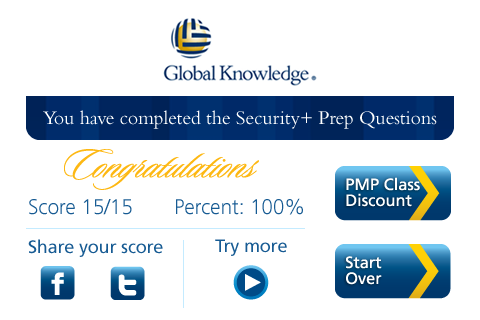
<style>
.page{position:relative;width:480px;height:320px;background:#ffffff}
.page>*{position:absolute;margin:0}
.t1{font:20px "Bembo";letter-spacing:-0.01em;color:#ffffff}
.t2{font:21px "Frutiger-Light";letter-spacing:-0.01em;color:#175b93}
.t3{font:18px "Frutiger-Roman";letter-spacing:-0.01em;color:#175b93}
</style>
<div class="page">
<p class="t1" style="left:43px;top:110px;width:394px;height:19px">You have completed the Security+ Prep Questions</p>
<p class="t2" style="left:176px;top:198px;width:127px;height:17px">Percent: 100%</p>
<p class="t2" style="left:29px;top:199px;width:103px;height:16px">Score 15/15</p>
<p class="t3" style="left:28px;top:239px;width:135px;height:18px">Share your score</p>
<p class="t3" style="left:215px;top:239px;width:72px;height:17px">Try more</p>
</div>
